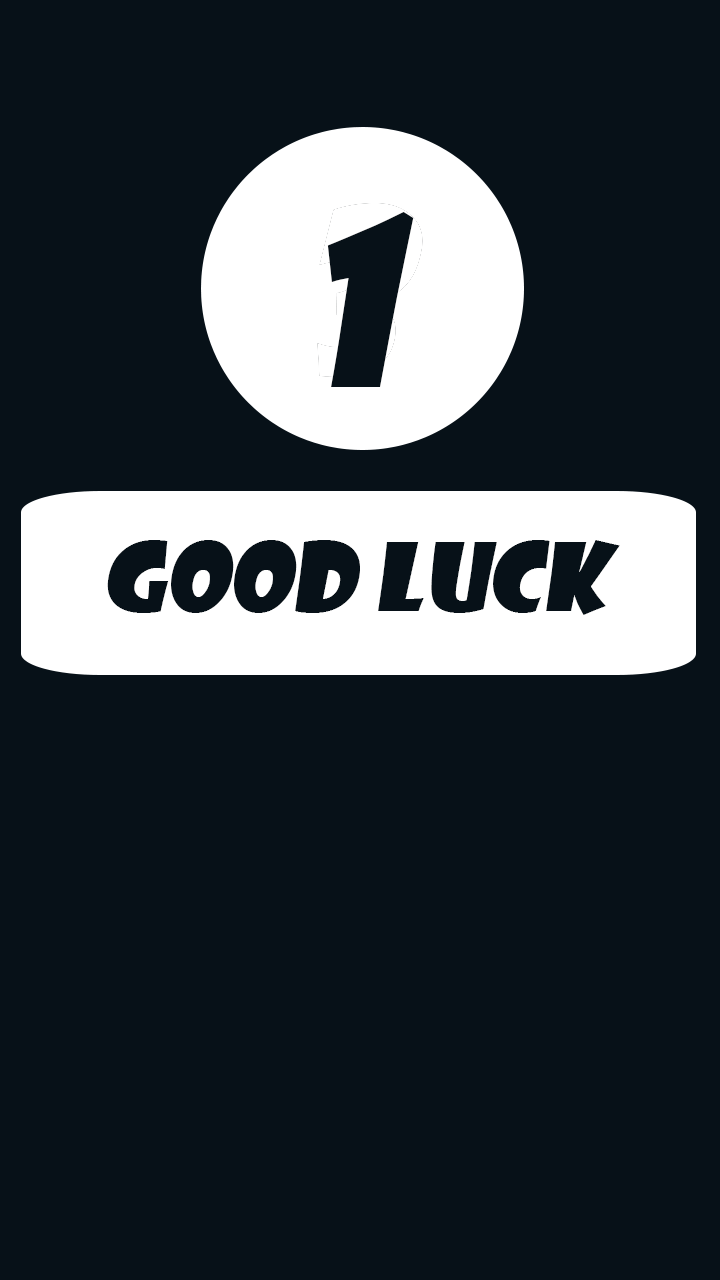
<style>
.page{position:relative;width:720px;height:1280px;background:#071118}
.page>*{position:absolute;margin:0}
.t1{font:225px "ShowcardGothic-Reg";color:#071118;font-style:italic}
.t2{font:91.7px "ShowcardGothic-Reg";color:#071118;font-style:italic}
</style>
<div class="page">
<p class="t1" style="left:327px;top:211px;width:87px;height:176px">1</p>
<p class="t2" style="left:107px;top:540px;width:513px;height:75px">Good LUCK</p>
</div>
